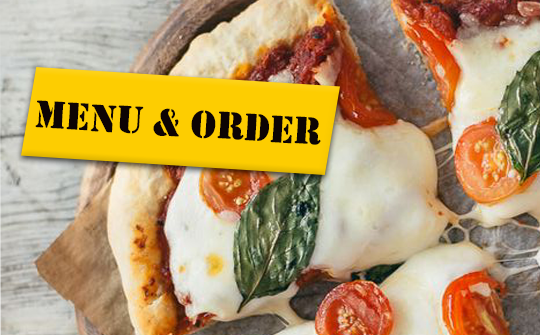
<style>
.page{position:relative;width:540px;height:335px}
.page>*{position:absolute;margin:0}
.t1{font:40.1px "Stencil";color:#0d0404}
</style>
<div class="page">
<p class="t1" style="left:35px;top:100px;width:286px;height:45px;rotate:3deg">Menu &amp; ORDER</p>
</div>
